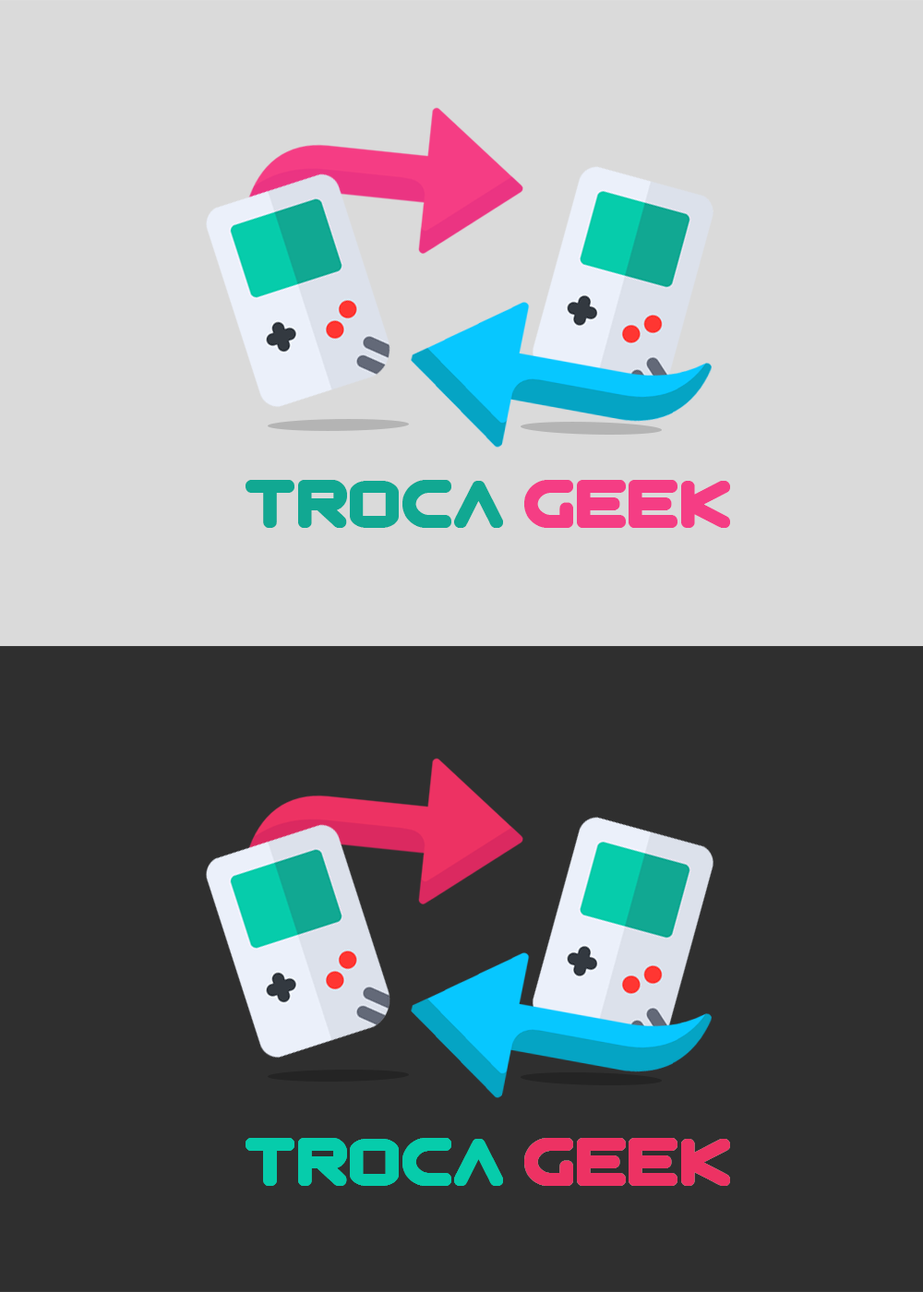
<style>
.page{position:relative;width:923px;height:1292px;background:#dadada}
.page>*{position:absolute;margin:0}
.t1{font:66.4px "Zian";color:#11a892;font-weight:bold}
.t2{font:66.4px "Zian";color:#f53d84;font-weight:bold}
.t3{font:66.4px "Zian";font-weight:bold}
.t4{font:66.4px "Zian";color:#06ccab;font-weight:bold}
.t5{font:66.4px "Zian";color:#ed3263;font-weight:bold}
</style>
<div class="page">
<p class="t1" style="left:245px;top:480px;width:485px;height:48px">troca <span class="t2">geek</span></p>
<p class="t3" style="left:245px;top:1138px;width:485px;height:48px">troca geek</p>
<p class="t4" style="left:245px;top:1138px;width:485px;height:48px">troca <span class="t5">geek</span></p>
</div>
